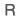
<style>
.page{position:relative;width:20px;height:20px;background:#ffffff}
.page>*{position:absolute;margin:0}
.t1{font:16px "Helvetica";color:#555555}
</style>
<div class="page">
<p class="t1" style="left:5px;top:4px;width:11px;height:12px">R</p>
</div>
